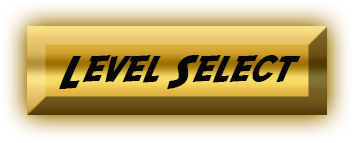
<style>
.page{position:relative;width:355px;height:143px}
.page>*{position:absolute;margin:0}
.t1{font:36.9px "SFFedora";letter-spacing:-0.005em;color:#060606;scale:1.05 1}
</style>
<div class="page">
<p class="t1" style="left:59px;top:55px;width:242px;height:34px">Level Select</p>
</div>
